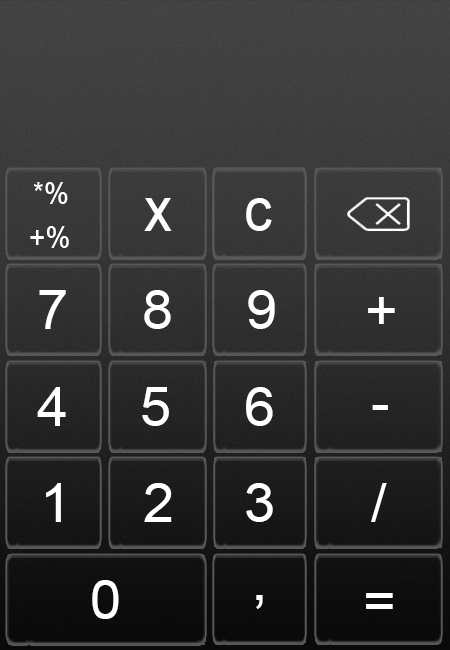
<style>
.page{position:relative;width:450px;height:650px}
.page>*{position:absolute;margin:0}
.t1{font:31.3px "ArialMT";color:#ffffff;scale:0.89 1}
.t2{font:62.6px "ArialMT";color:#ffffff;scale:0.9 1}
.t3{font:58.3px "ArialMT";color:#ffffff;scale:0.96 1}
.t4{font:54.1px "ArialMT";color:#ffffff;scale:1.03 1}
.t5{font:57.5px "ArialMT";color:#ffffff;scale:1.06 1}
</style>
<div class="page">
<p class="t1" style="left:34px;top:182px;width:34px;height:22px">*%</p>
<p class="t2" style="left:144px;top:198px;width:28px;height:33px">x</p>
<p class="t3" style="left:246px;top:198px;width:26px;height:33px">c</p>
<p class="t1" style="left:30px;top:226px;width:39px;height:22px">+%</p>
<p class="t4" style="left:39px;top:290px;width:27px;height:39px">7</p>
<p class="t4" style="left:144px;top:290px;width:27px;height:39px">8</p>
<p class="t4" style="left:248px;top:290px;width:27px;height:39px">9</p>
<p class="t4" style="left:368px;top:297px;width:27px;height:27px">+</p>
<p class="t4" style="left:37px;top:387px;width:29px;height:39px">4</p>
<p class="t4" style="left:142px;top:387px;width:27px;height:39px">5</p>
<p class="t4" style="left:246px;top:387px;width:27px;height:39px">6</p>
<p class="t4" style="left:372px;top:405px;width:16px;height:5px">-</p>
<p class="t4" style="left:46px;top:483px;width:15px;height:39px">1</p>
<p class="t4" style="left:144px;top:483px;width:28px;height:39px">2</p>
<p class="t4" style="left:246px;top:483px;width:27px;height:39px">3</p>
<p class="t4" style="left:371px;top:483px;width:16px;height:39px">/</p>
<p class="t4" style="left:92px;top:580px;width:27px;height:39px">0</p>
<p class="t4" style="left:366px;top:593px;width:27px;height:16px">=</p>
<p class="t5" style="left:256px;top:595px;width:7px;height:14px">,</p>
</div>
